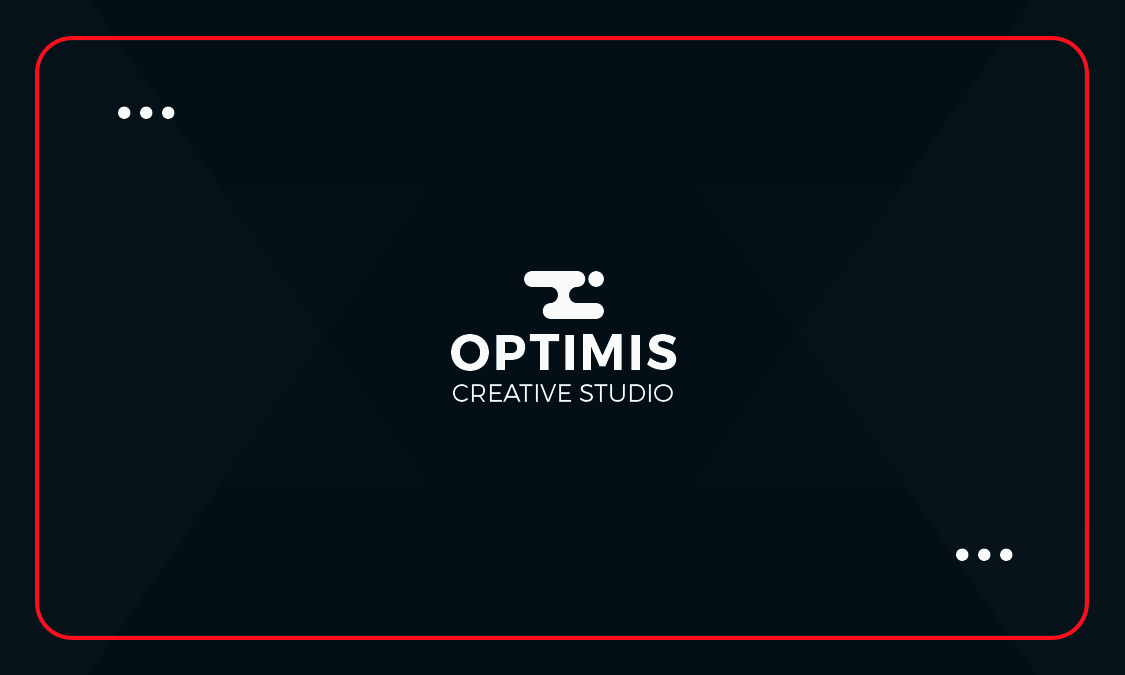
<style>
.page{position:relative;width:1125px;height:675px;background:#040e15}
.page>*{position:absolute;margin:0}
.t1{font:75px "Montserrat-Bold";letter-spacing:0.05em;color:#f9fbfb}
.t2{font:50px "Montserrat-Bold";letter-spacing:0.05em;color:#f9fbfb}
.t3{font:25px "Montserrat-Light";color:#f9fbfb}
</style>
<div class="page">
<p class="t1" style="left:118px;top:106px;width:57px;height:13px">...</p>
<p class="t2" style="left:451px;top:334px;width:226px;height:37px">OPTIMIS</p>
<p class="t3" style="left:452px;top:384px;width:221px;height:18px">CREATIVE STUDIO</p>
<p class="t1" style="left:956px;top:548px;width:57px;height:13px">...</p>
</div>
